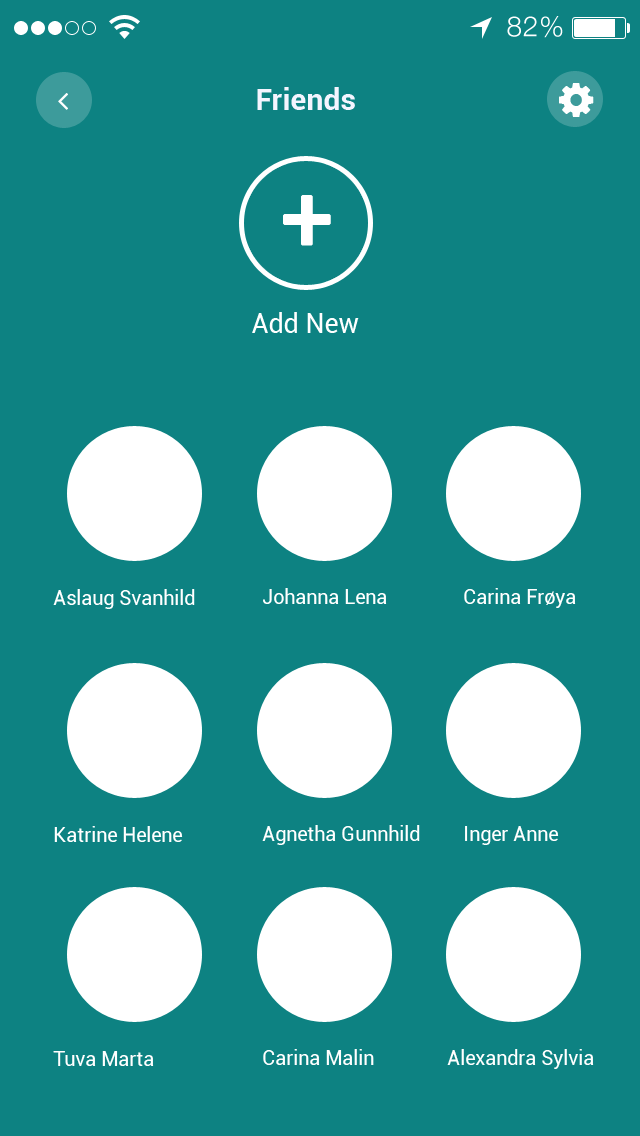
<style>
.page{position:relative;width:640px;height:1136px;background:#0d8282}
.page>*{position:absolute;margin:0}
.t1{font:28px "HelveticaNeue-Light";letter-spacing:0.025em;color:#ffffff}
.t2{font:30px "Roboto-Bold";color:#f4f5ff}
.t3{font:92.5px "Roboto-Regular";letter-spacing:0.05em;color:#ffffff;font-weight:bold}
.t4{font:27px "Roboto-Regular";color:#ffffff}
.t5{font:20px "Roboto-Regular";color:#ffffff}
</style>
<div class="page">
<p class="t1" style="left:507px;top:16px;width:56px;height:22px">82%</p>
<p class="t2" style="left:257px;top:87px;width:98px;height:23px">Friends</p>
<p class="t3" style="left:283px;top:195px;width:48px;height:51px">+</p>
<p class="t4" style="left:252px;top:312px;width:107px;height:21px">Add New</p>
<p class="t5" style="left:53px;top:589px;width:142px;height:20px">Aslaug Svanhild</p>
<p class="t5" style="left:263px;top:588px;width:124px;height:16px">Johanna Lena</p>
<p class="t5" style="left:464px;top:588px;width:112px;height:20px">Carina Frøya</p>
<p class="t5" style="left:54px;top:826px;width:129px;height:16px">Katrine Helene</p>
<p class="t5" style="left:262px;top:825px;width:158px;height:20px">Agnetha Gunnhild</p>
<p class="t5" style="left:465px;top:826px;width:94px;height:19px">Inger Anne</p>
<p class="t5" style="left:263px;top:1049px;width:111px;height:16px">Carina Malin</p>
<p class="t5" style="left:447px;top:1049px;width:147px;height:20px">Alexandra Sylvia</p>
<p class="t5" style="left:53px;top:1051px;width:101px;height:15px">Tuva Marta</p>
</div>
